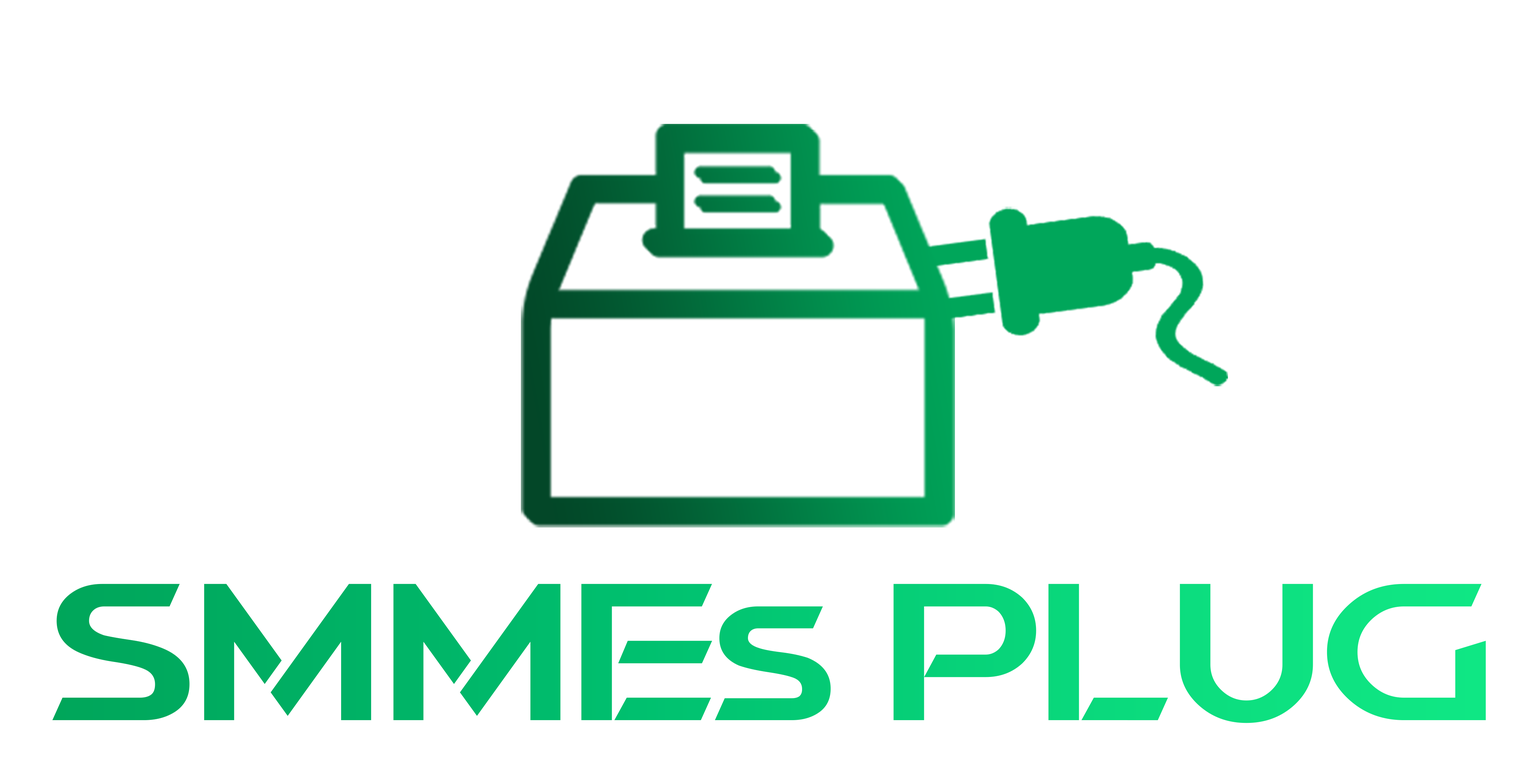
<style>
.page{position:relative;width:1532px;height:778px;background:#ffffff}
.page>*{position:absolute;margin:0}
.t1{font:191.2px "SweraDemo";scale:1.08 1}
</style>
<div class="page">
<p class="t1" style="left:52px;top:584px;width:1434px;height:139px">SMMEs PLUG</p>
</div>
